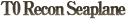
<style>
.page{position:relative;width:127px;height:19px;background:#ffffff}
.page>*{position:absolute;margin:0}
.t1{font:18px "RyuminPro-ExBold";letter-spacing:-0.11em;color:#4a3f32;font-weight:bold;scale:0.9 1}
</style>
<div class="page">
<p class="t1" style="left:0px;top:1px;width:126px;height:18px">T0 Recon Seaplane</p>
</div>
